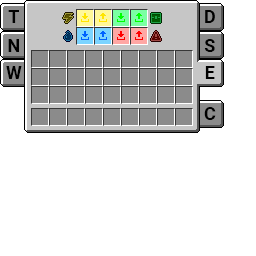
<style>
.page{position:relative;width:256px;height:256px;background:#ffffff}
.page>*{position:absolute;margin:0}
.t1{font:18px "Roboto-Bold";color:#000000}
</style>
<div class="page">
<p class="t1" style="left:8px;top:10px;width:11px;height:13px">T</p>
<p class="t1" style="left:205px;top:10px;width:10px;height:13px">D</p>
<p class="t1" style="left:8px;top:39px;width:11px;height:13px">N</p>
<p class="t1" style="left:204px;top:39px;width:11px;height:13px">S</p>
<p class="t1" style="left:6px;top:66px;width:16px;height:13px">W</p>
<p class="t1" style="left:205px;top:66px;width:10px;height:13px">E</p>
<p class="t1" style="left:204px;top:107px;width:12px;height:13px">C</p>
</div>
